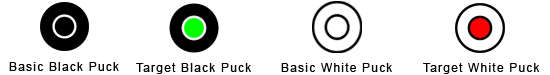
<style>
.page{position:relative;width:550px;height:75px;background:#ffffff}
.page>*{position:absolute;margin:0}
.t1{font:12px "ArialMT";letter-spacing:0.1em;color:#000000}
</style>
<div class="page">
<p class="t1" style="left:9px;top:62px;width:110px;height:9px">Basic Black Puck</p>
<p class="t1" style="left:136px;top:63px;width:115px;height:11px">Target Black Puck</p>
<p class="t1" style="left:281px;top:63px;width:111px;height:9px">Basic White Puck</p>
<p class="t1" style="left:423px;top:63px;width:117px;height:11px">Target White Puck</p>
</div>
